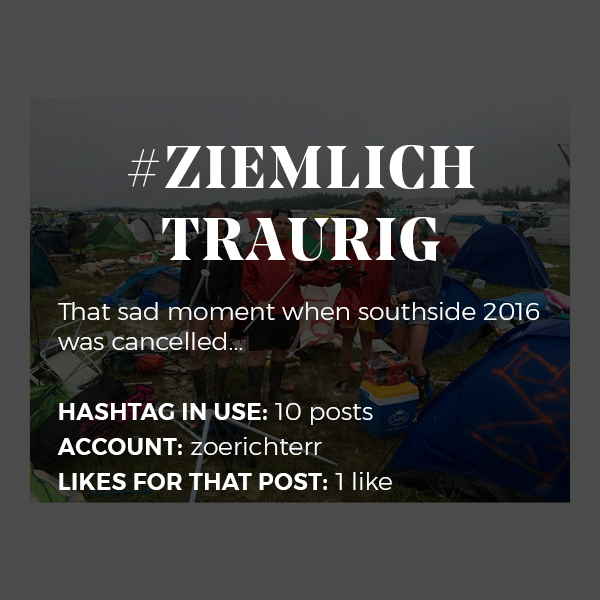
<style>
.page{position:relative;width:600px;height:600px;background:#4c4c4c}
.page>*{position:absolute;margin:0}
.t1{font:25px "Montserrat-Light";color:#ffffff}
.t2{font:60px "NoeDisplay-Bold";letter-spacing:0.05em;color:#ffffff;text-transform:uppercase}
.t3{font:23px/35px "Montserrat-SemiBold";letter-spacing:0.02em;color:#ffffff;text-transform:uppercase}
.t4{font:25px/35px "Montserrat-Light";color:#ffffff}
</style>
<div class="page">
<p class="t1" style="left:57px;top:145px;width:483px;height:345px;text-align:center"><span class="t2">#ziemlich<br>traurig<br></span><br>That sad moment when southside 2016 was cancelled... <br><br><span class="t3">Hashtag in use:</span><span class="t4"> 10 posts<br></span><span class="t3">Account:</span><span class="t4"> zoerichterr<br></span><span class="t3">Likes for that post:</span><span class="t4"> 1 like</span></p>
</div>
